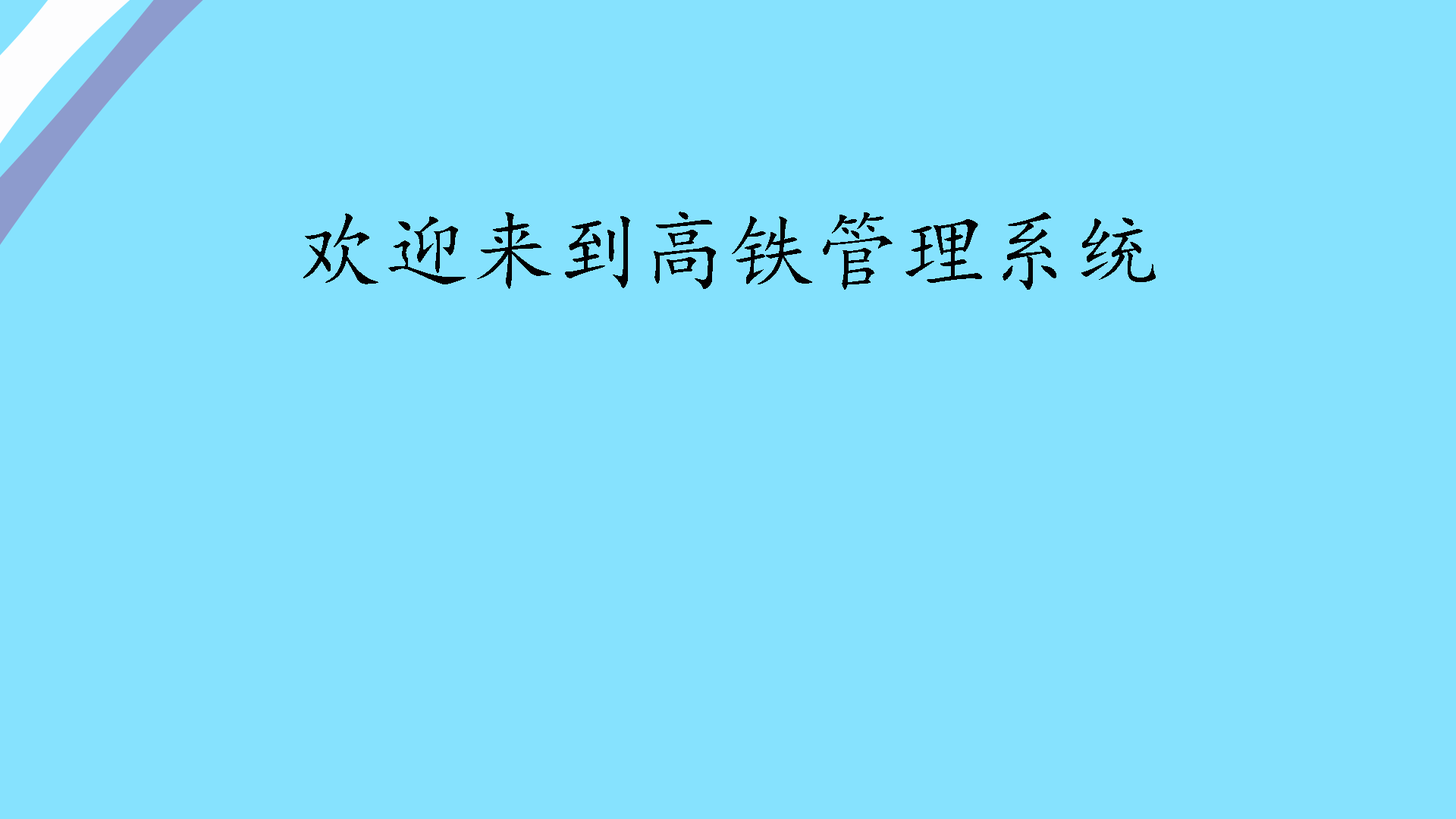
<style>
.page{position:relative;width:1456px;height:819px;background:#86e2fe}
.page>*{position:absolute;margin:0}
.t1{font:86.1px "KaiTi";color:#000000}
</style>
<div class="page">
<p class="t1" style="left:303px;top:212px;width:853px;height:78px">欢迎来到高铁管理系统</p>
</div>
